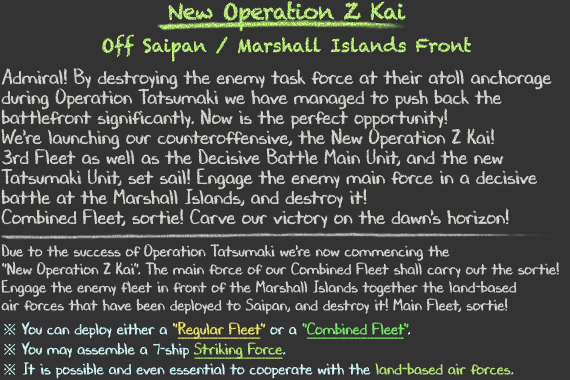
<style>
.page{position:relative;width:570px;height:380px;background:#333333}
.page>*{position:absolute;margin:0}
.t1{font:18px/36px "Chalkduster"}
.t2{font:22px/36px "Chalkduster";letter-spacing:-0.04em}
.t3{font:20px/20px "DJBChalkItUp";color:#d9ded6}
.t4{font:16px/18px "DJBChalkItUp";color:#d9ded6}
.t5{font:16px/24px "DJBChalkItUp";color:#d9ded6}
.t6{font:16px/20px "TimesNewRomanPSMT";color:#d7feff}
.t7{font:16px/18px "DJBChalkItUp";color:#d7feff}
.t8{font:16px/18px "DJBChalkItUp";color:#f5ed68}
.t9{font:16px/18px "DJBChalkItUp";color:#f5ed68;text-decoration:underline}
.t10{font:16px/18px "DJBChalkItUp";color:#7bf26b}
.t11{font:16px/18px "DJBChalkItUp";color:#7bf26b;text-decoration:underline}
.t12{font:16px/16px "TimesNewRomanPSMT";color:#d7feff}
.t13{font:16px/16px "DJBChalkItUp";color:#d7feff}
.t14{font:16px/20px "DJBChalkItUp";color:#bdef78;text-decoration:underline}
.t15{font:16px/20px "DJBChalkItUp";color:#d7feff}
.t16{font:16px/16px "DJBChalkItUp";color:#bdef78}
</style>
<div class="page">
<p class="t1" style="left:102px;top:1px;width:369px;height:61px;text-align:center"><span class="t2">New Operation Z Kai<br></span>Off Saipan / Marshall Islands Front</p>
<p class="t3" style="left:1px;top:68px;width:558px;height:311px">Admiral! By destroying the enemy task force at their atoll anchorage<br>during Operation Tatsumaki we have managed to push back the<br>battlefront significantly. Now is the perfect opportunity!<br>We're launching our counteroffensive, the New Operation Z Kai!<br>3rd Fleet as well as the Decisive Battle Main Unit, and the new<br>Tatsumaki Unit, set sail! Engage the enemy main force in a decisive<br>battle at the Marshall Islands, and destroy it!<br>Combined Fleet, sortie! Carve our victory on the dawn's horizon!<br><br><span class="t4">Due to the success of Operation Tatsumaki we're now commencing the<br>"New Operation Z Kai". The main force of our Combined Fleet shall carry out the sortie!<br>Engage the enemy fleet in front of the Marshall Islands together the land-based<br>air forces that have been deployed to Saipan, and destroy it! Main Fleet, sortie</span><span class="t5">!<br></span><span class="t6">※ </span><span class="t7">You can deploy either a </span><span class="t8">"</span><span class="t9">Regular Fleet</span><span class="t8">"</span><span class="t7"> or a </span><span class="t10">"</span><span class="t11">Combined Fleet</span><span class="t10">"</span><span class="t7">.<br></span><span class="t12">※ </span><span class="t13">You may assemble a 7-ship </span><span class="t14">Striking Force</span><span class="t15">.<br></span><span class="t6">※ </span><span class="t13">It is possible and even essential to cooperate with the </span><span class="t16">land-based air forces</span><span class="t13">.</span></p>
</div>
